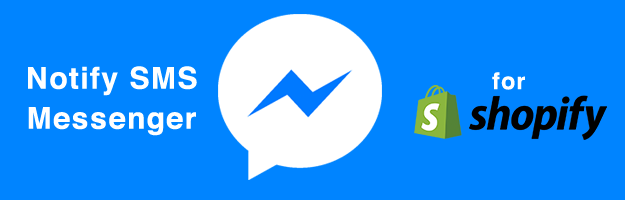
<style>
.page{position:relative;width:625px;height:200px;background:#0084ff}
.page>*{position:absolute;margin:0}
.t1{font:30px/40px "Helvetica-Bold";letter-spacing:0.05em;color:#ffffff}
.t2{font:23px "Helvetica-Bold";letter-spacing:0.05em;color:#ffffff}
</style>
<div class="page">
<p class="t1" style="left:28px;top:66px;width:169px;height:70px;text-align:center">Notify SMS<br>Messenger</p>
<p class="t2" style="left:492px;top:72px;width:33px;height:18px">for</p>
</div>
